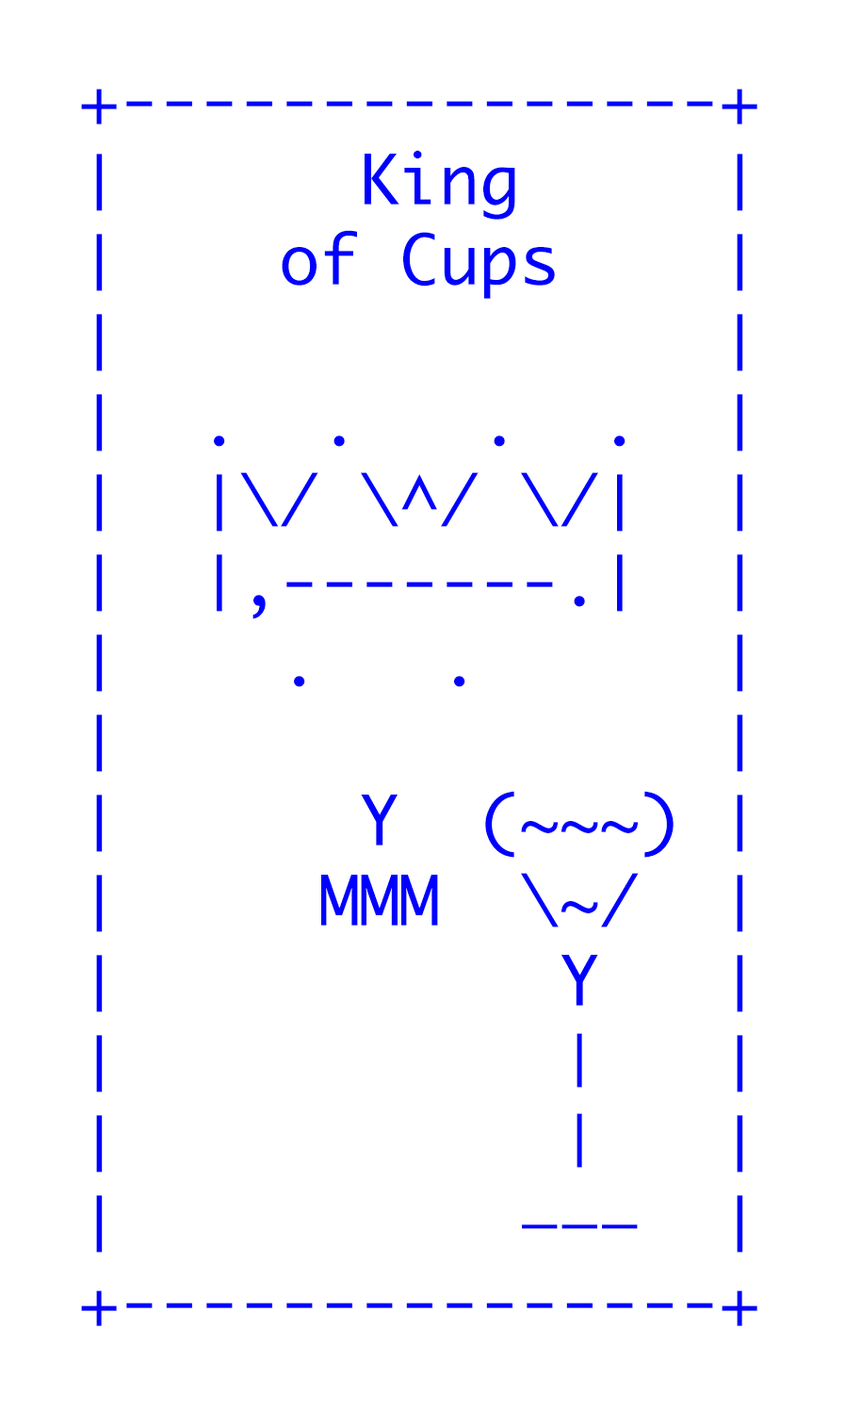
<style>
.page{position:relative;width:845px;height:1411px;background:#ffffff}
.page>*{position:absolute;margin:0}
.t1{font:66.7px "Monaco";color:#0000ff}
</style>
<div class="page">
<p class="t1" style="left:81px;top:89px;width:677px;height:1237px">+---------------+<br>│      King     │<br>│    of Cups    │<br>│               │<br>│  .  .   .  .  │<br>│  │\/ \^/ \/│  │<br>│  │,-------.│  │<br>│    .   .      │ <br>│               │ <br>│      Y  (~~~) │<br>│     MMM  \~/  │ <br>│           Y   │ <br>│           |   │<br>│           |   │<br>│          ———  │<br>+---------------+</p>
</div>
